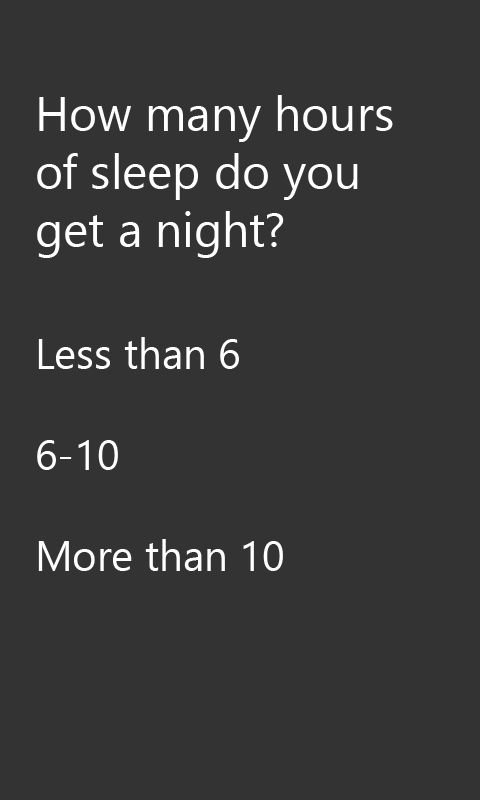
<style>
.page{position:relative;width:480px;height:800px;background:#333333}
.page>*{position:absolute;margin:0}
.t1{font:48px "SegoeUIHistoric";color:#ffffff}
.t2{font:42px "SegoeUIHistoric";color:#ffffff}
</style>
<div class="page">
<p class="t1" style="left:37px;top:95px;width:356px;height:476px">How many hours<br>of sleep do you<br>get a night?<br><br><span class="t2">Less than 6<br><br>6-10<br><br>More than 10</span></p>
</div>
